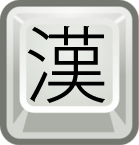
<style>
.page{position:relative;width:139px;height:145px}
.page>*{position:absolute;margin:0}
.t1{font:82.7px "KozGoPro-Light";color:#000000}
</style>
<div class="page">
<p class="t1" style="left:27px;top:26px;width:78px;height:77px">漢</p>
</div>
